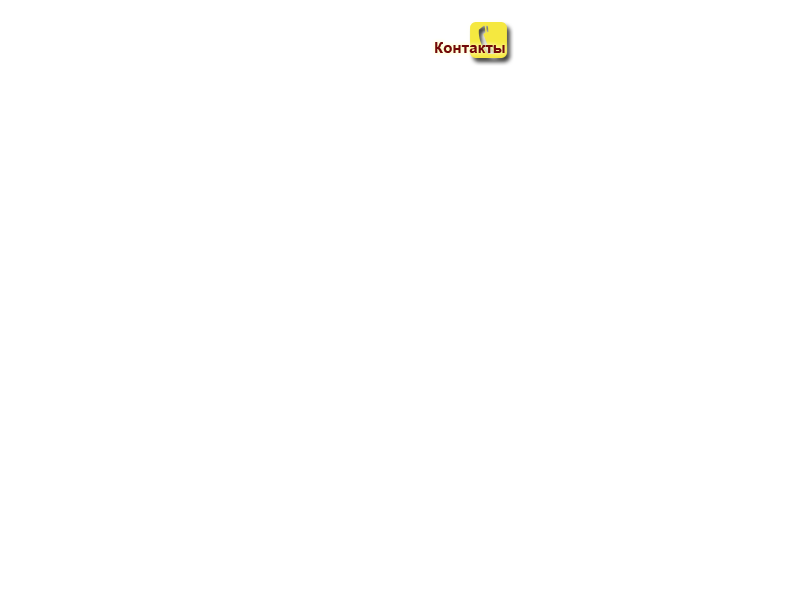
<style>
.page{position:relative;width:800px;height:600px;background:#ffffff}
.page>*{position:absolute;margin:0}
.t1{font:15.2px "Arial-BoldMT";color:#720909}
</style>
<div class="page">
<p class="t1" style="left:435px;top:42px;width:70px;height:11px">Контакты</p>
</div>
